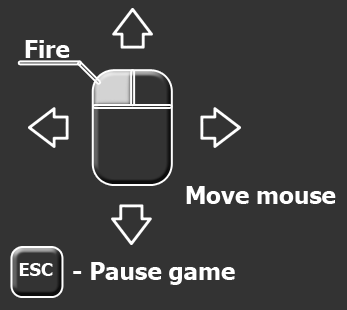
<style>
.page{position:relative;width:347px;height:310px;background:#333333}
.page>*{position:absolute;margin:0}
.t1{font:24px "Tahoma-Bold";color:#ffffff}
.t2{font:18px "Tahoma-Bold";color:#ffffff}
</style>
<div class="page">
<p class="t1" style="left:25px;top:40px;width:45px;height:18px">Fire</p>
<p class="t1" style="left:186px;top:186px;width:150px;height:18px">Move mouse</p>
<p class="t2" style="left:19px;top:263px;width:34px;height:13px">ESC</p>
<p class="t1" style="left:73px;top:262px;width:162px;height:23px">- Pause game</p>
</div>
